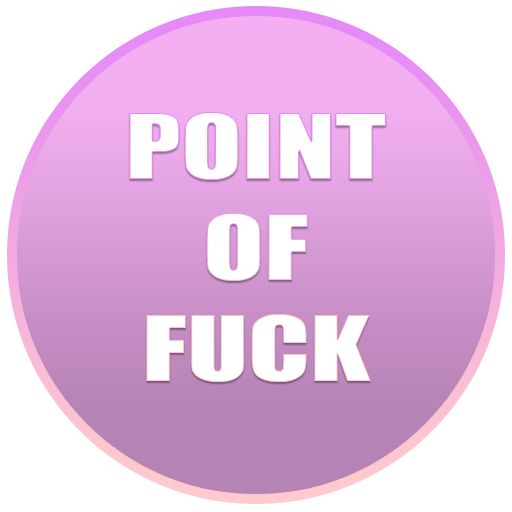
<style>
.page{position:relative;width:512px;height:512px;background:#ffffff}
.page>*{position:absolute;margin:0}
.t1{font:84px "Impact";color:#ffffff;scale:1.33 1}
</style>
<div class="page">
<p class="t1" style="left:129px;top:112px;width:257px;height:270px;text-align:center">POINT<br>OF<br>FUCK</p>
</div>
